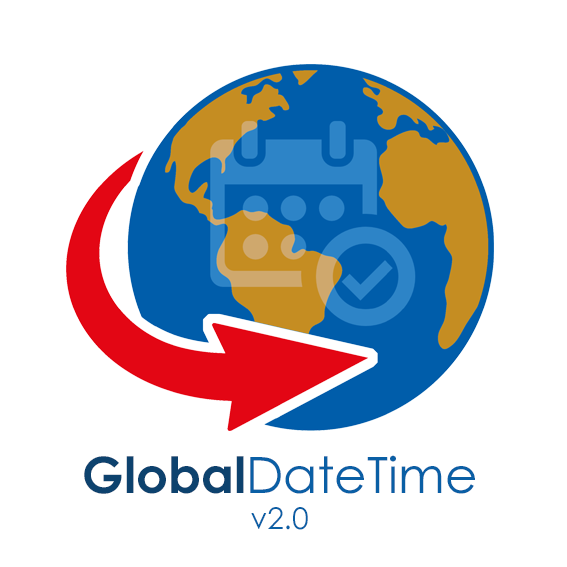
<style>
.page{position:relative;width:567px;height:567px;background:#ffffff}
.page>*{position:absolute;margin:0}
.t1{font:50px "CenturyGothic";color:#0a5fa5}
.t2{font:50px "CenturyGothic-Bold";color:#0d426e}
.t3{font:30px "CenturyGothic";color:#0a5fa5}
</style>
<div class="page">
<p class="t1" style="left:84px;top:455px;width:391px;height:75px;text-align:center"><span class="t2">Global</span>DateTime<br><span class="t3">v2.0</span></p>
</div>
